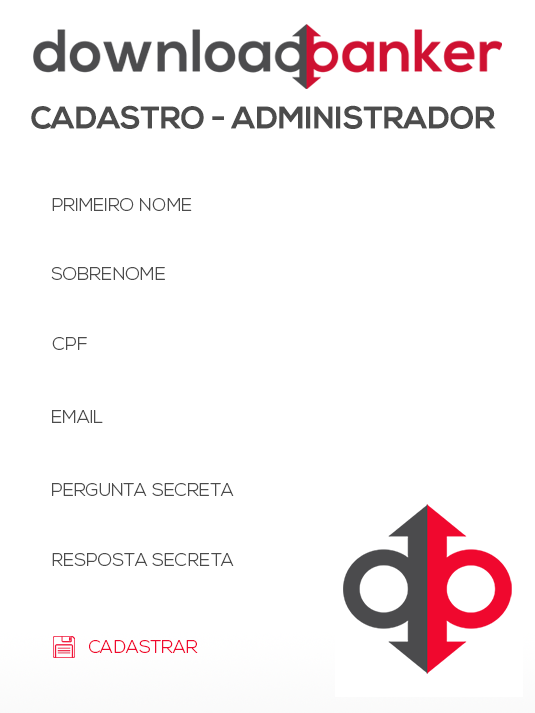
<style>
.page{position:relative;width:535px;height:713px;background:#ffffff}
.page>*{position:absolute;margin:0}
.t1{font:18px "NexaLight";color:#4c4c4c}
.t2{font:18.1px "NexaLight";color:#4c4c4c}
.t3{font:18px "NexaLight";color:#f0082e}
</style>
<div class="page">
<p class="t1" style="left:52px;top:198px;width:140px;height:13px">PRIMEIRO NOME</p>
<p class="t2" style="left:51px;top:267px;width:114px;height:13px">SOBRENOME</p>
<p class="t2" style="left:52px;top:337px;width:35px;height:13px">CPF</p>
<p class="t2" style="left:52px;top:410px;width:51px;height:13px">EMAIL</p>
<p class="t1" style="left:52px;top:483px;width:182px;height:13px">PERGUNTA SECRETA</p>
<p class="t1" style="left:52px;top:553px;width:182px;height:13px">RESPOSTA SECRETA</p>
<p class="t3" style="left:89px;top:640px;width:109px;height:13px">CADASTRAR</p>
</div>
